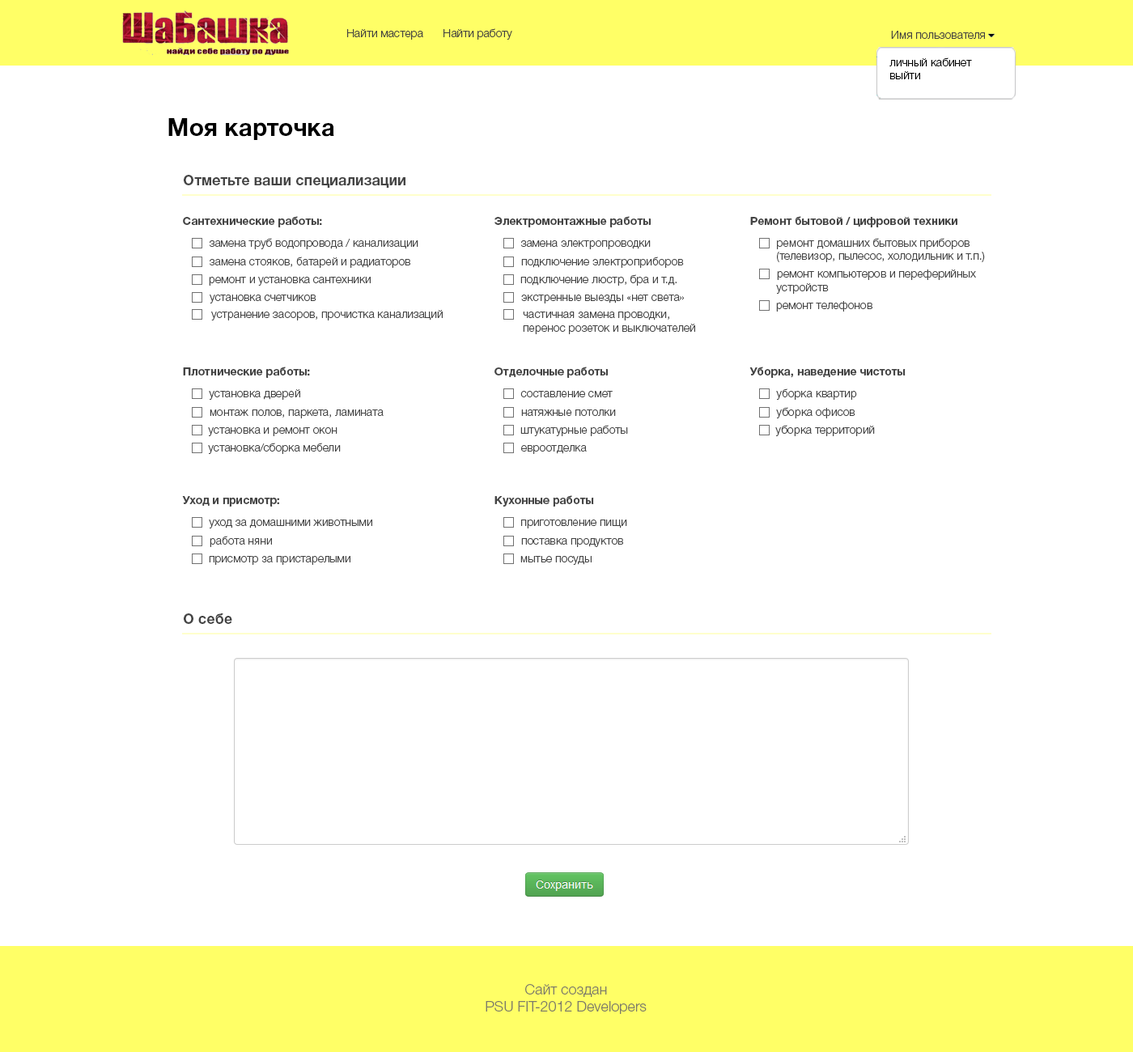
<style>
.page{position:relative;width:1133px;height:1052px;background:#ffffff}
.page>*{position:absolute;margin:0}
.t1{font:11.3px "HelveticaNeueCyr-Light";color:#444241}
.t2{font:11.3px "HelveticaNeueCyr-Light";color:#000000}
.t3{font:24.3px "HelveticaNeueCyr-Bold";color:#000000}
.t4{font:14.6px "HelveticaNeueCyr-Bold";color:#444444}
.t5{font:11.3px "HelveticaNeueCyr-Bold";color:#444444}
.t6{font:11.3px "HelveticaNeueCyr-Light";color:#444444}
.t7{font:14.6px "HelveticaNeueCyr-Light";color:#7c7a6a}
</style>
<div class="page">
<p class="t1" style="left:347px;top:29px;width:76px;height:11px">Найти мастера</p>
<p class="t1" style="left:444px;top:28px;width:68px;height:12px">Найти работу</p>
<p class="t1" style="left:891px;top:31px;width:94px;height:8px">Имя пользователя</p>
<p class="t2" style="left:890px;top:57px;width:82px;height:22px">личный кабинет<br>выйти</p>
<p class="t3" style="left:168px;top:118px;width:166px;height:22px">Моя карточка</p>
<p class="t4" style="left:184px;top:175px;width:222px;height:13px">Отметьте ваши специализации</p>
<p class="t5" style="left:183px;top:216px;width:139px;height:11px">Сантехнические работы:</p>
<p class="t5" style="left:495px;top:216px;width:156px;height:11px">Электромонтажные работы</p>
<p class="t5" style="left:750px;top:216px;width:208px;height:11px">Ремонт бытовой / цифровой техники</p>
<p class="t6" style="left:209px;top:238px;width:209px;height:11px">замена труб водопровода / канализации</p>
<p class="t6" style="left:520px;top:240px;width:131px;height:9px">замена электропроводки</p>
<p class="t6" style="left:777px;top:238px;width:208px;height:24px">ремонт домашних бытовых приборов<br>(телевизор, пылесос, холодильник и т.п.)</p>
<p class="t6" style="left:210px;top:257px;width:200px;height:11px">замена стояков, батарей и радиаторов</p>
<p class="t6" style="left:521px;top:257px;width:163px;height:11px">подключение электроприборов</p>
<p class="t6" style="left:776px;top:270px;width:200px;height:24px">ремонт компьютеров и переферийных <br>устройств</p>
<p class="t6" style="left:209px;top:277px;width:162px;height:9px">ремонт и установка сантехники</p>
<p class="t6" style="left:520px;top:274px;width:157px;height:12px">подключение люстр, бра и т.д.</p>
<p class="t6" style="left:210px;top:295px;width:106px;height:9px">установка счетчиков</p>
<p class="t6" style="left:521px;top:295px;width:163px;height:9px">экстренные выезды «нет света»</p>
<p class="t6" style="left:776px;top:301px;width:97px;height:11px">ремонт телефонов</p>
<p class="t6" style="left:211px;top:310px;width:232px;height:11px">устранение засоров, прочистка канализаций</p>
<p class="t6" style="left:523px;top:312px;width:172px;height:22px">частичная замена проводки, <br>перенос розеток и выключателей</p>
<p class="t5" style="left:183px;top:367px;width:127px;height:11px">Плотнические работы:</p>
<p class="t5" style="left:495px;top:367px;width:113px;height:11px">Отделочные работы</p>
<p class="t5" style="left:750px;top:367px;width:156px;height:11px">Уборка, наведение чистоты</p>
<p class="t6" style="left:209px;top:389px;width:91px;height:11px">установка дверей</p>
<p class="t6" style="left:776px;top:389px;width:81px;height:11px">уборка квартир</p>
<p class="t6" style="left:520px;top:391px;width:93px;height:6px">составление смет</p>
<p class="t6" style="left:210px;top:410px;width:174px;height:8px">монтаж полов, паркета, ламината</p>
<p class="t6" style="left:521px;top:410px;width:95px;height:6px">натяжные потолки</p>
<p class="t6" style="left:776px;top:407px;width:80px;height:11px">уборка офисов</p>
<p class="t6" style="left:520px;top:425px;width:108px;height:11px">штукатурные работы</p>
<p class="t6" style="left:775px;top:425px;width:100px;height:11px">уборка территорий</p>
<p class="t6" style="left:208px;top:427px;width:130px;height:9px">установка и ремонт окон</p>
<p class="t6" style="left:208px;top:443px;width:133px;height:11px">установка/сборка мебели</p>
<p class="t6" style="left:521px;top:445px;width:66px;height:9px">евроотделка</p>
<p class="t5" style="left:182px;top:496px;width:97px;height:11px">Уход и присмотр:</p>
<p class="t5" style="left:495px;top:495px;width:99px;height:12px">Кухонные работы</p>
<p class="t6" style="left:209px;top:520px;width:163px;height:9px">уход за домашними животными</p>
<p class="t6" style="left:521px;top:520px;width:106px;height:9px">приготовление пищи</p>
<p class="t6" style="left:210px;top:536px;width:62px;height:11px">работа няни</p>
<p class="t6" style="left:521px;top:538px;width:102px;height:9px">поставка продуктов</p>
<p class="t6" style="left:209px;top:556px;width:141px;height:9px">присмотр за пристарелыми</p>
<p class="t6" style="left:520px;top:556px;width:72px;height:9px">мытье посуды</p>
<p class="t4" style="left:184px;top:614px;width:48px;height:10px">О себе</p>
<p class="t7" style="left:486px;top:984px;width:161px;height:30px;text-align:center">Сайт создан<br>PSU FIT-2012 Developers</p>
</div>
